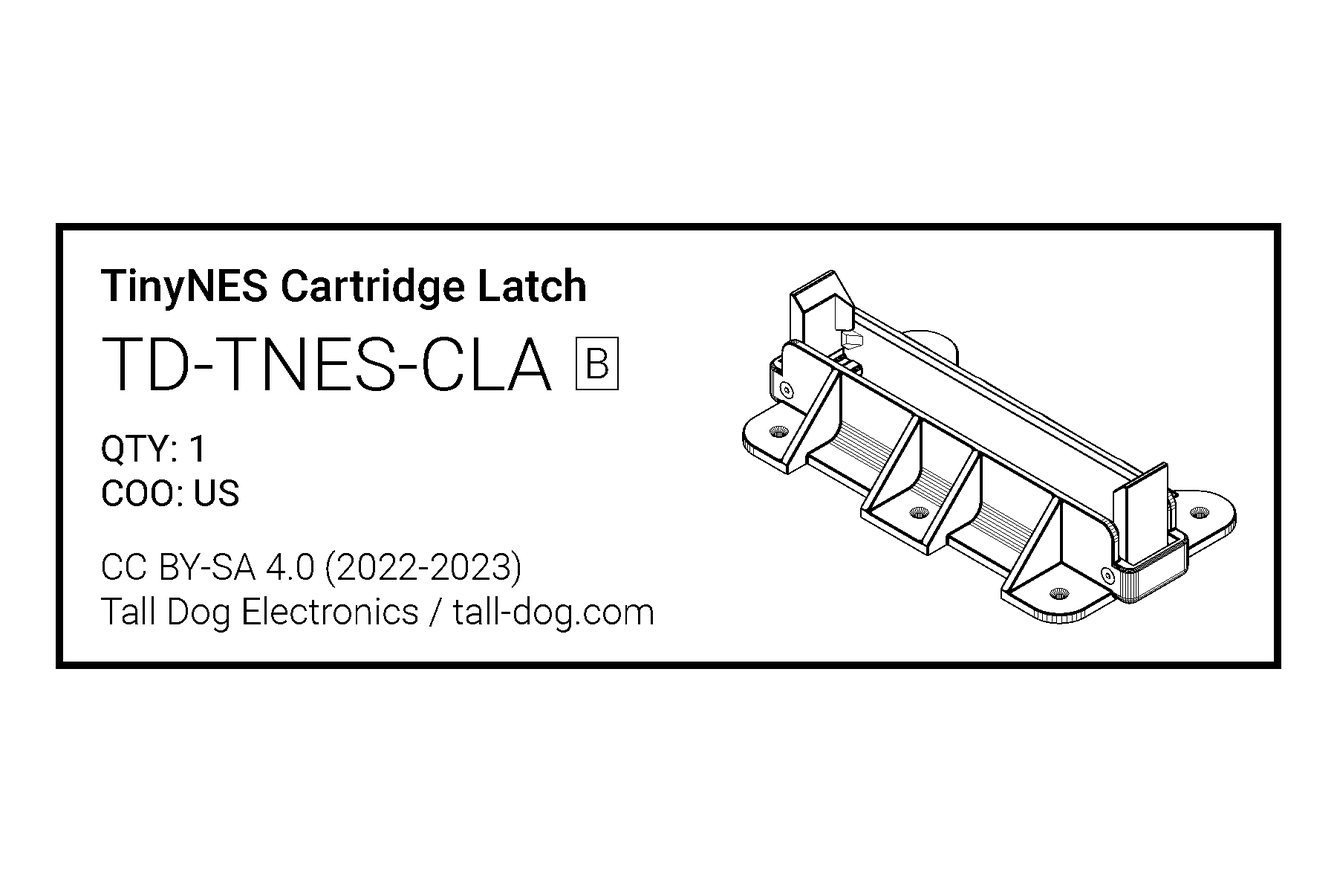
<style>
.page{position:relative;width:1337px;height:892px;background:#ffffff}
.page>*{position:absolute;margin:0}
.t1{font:44.6px "Roboto-Medium";color:#000000}
.t2{font:74.3px "Roboto-Light";color:#000000}
.t3{font:37.2px "Roboto-Regular";color:#000000}
.t4{font:43.3px "Roboto-Light";color:#000000}
.t5{font:37.2px "Roboto-Light";color:#000000}
</style>
<div class="page">
<p class="t1" style="left:101px;top:267px;width:484px;height:239px">TinyNES Cartridge Latch<br><span class="t2">TD-TNES-CLA<br><br></span><span class="t3">QTY: 1<br>COO: US</span></p>
<p class="t4" style="left:588px;top:348px;width:21px;height:30px">B</p>
<p class="t5" style="left:101px;top:550px;width:552px;height:82px">CC BY-SA 4.0 (2022-2023)<br>Tall Dog Electronics / tall-dog.com</p>
</div>
